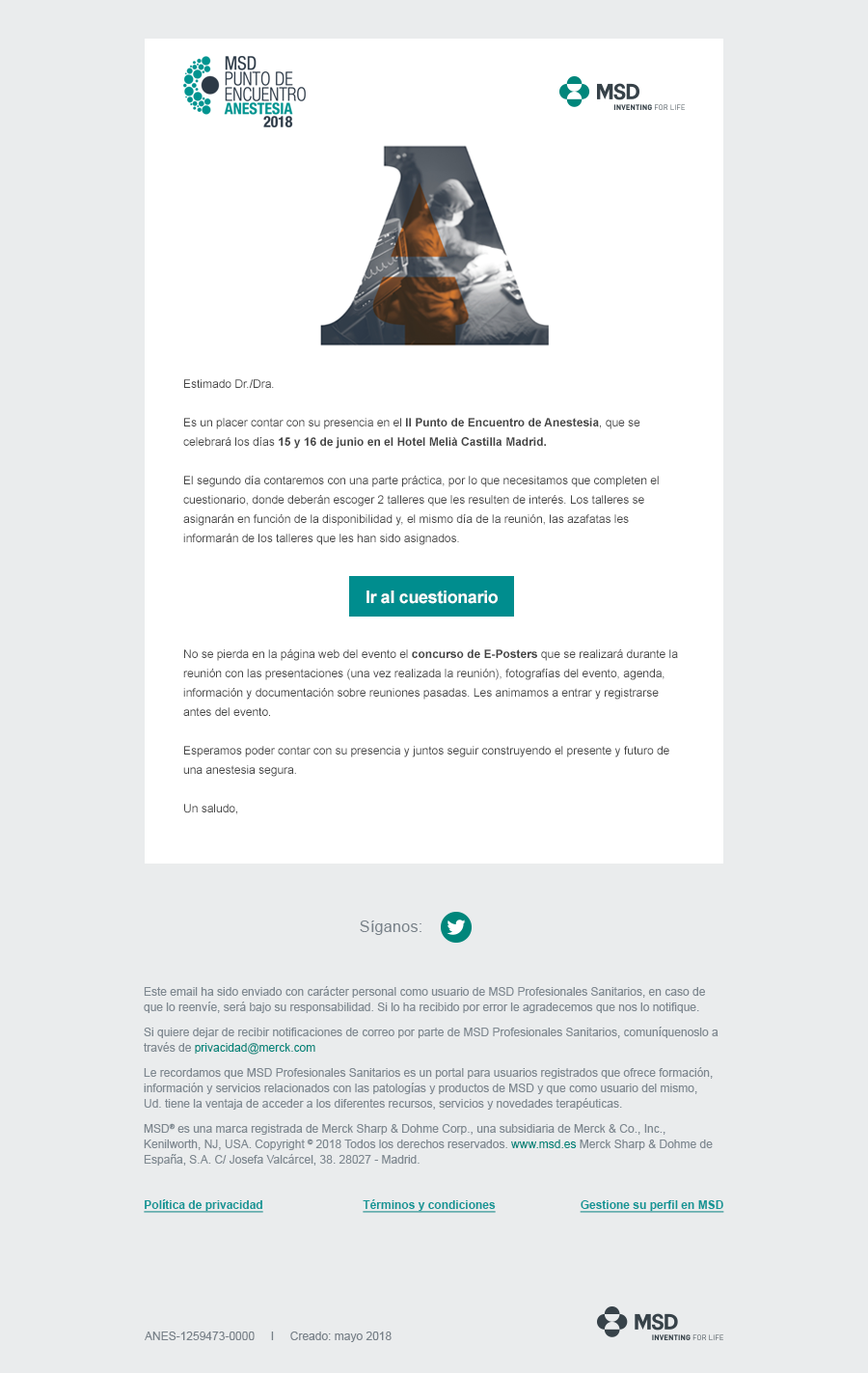
<style>
.page{position:relative;width:868px;height:1373px;background:#eaeced}
.page>*{position:absolute;margin:0}
.t1{font:11.6px/19.3px "ArialMT";color:#444444}
.t2{font:11.6px/19.3px "Arial-BoldMT";color:#444444}
.t3{font:17.4px "Arial-BoldMT";letter-spacing:-0.02em;color:#ffffff}
.t4{font:15.4px "ArialMT";letter-spacing:0.02em;color:#788189}
.t5{font:11.6px/15.4px "ArialMT";color:#7e8890}
.t6{font:11.6px/15.4px "ArialMT";color:#00867b}
.t7{font:11.6px "Arial-BoldMT";color:#139696;text-decoration:underline}
.t8{font:11.6px "ArialMT";color:#778088}
</style>
<div class="page">
<p class="t1" style="left:183px;top:379px;width:495px;height:435px">Estimado Dr./Dra.<br><br>Es un placer contar con su presencia en el <span class="t2">II Punto de Encuentro de Anestesia</span>, que se celebrará los días <span class="t2">15 y 16 de junio en el Hotel Melià Castilla Madrid.<br></span><br>El segundo día contaremos con una parte práctica, por lo que necesitamos que completen el cuestionario, donde deberán escoger 2 talleres que les resulten de interés. Los talleres se asignarán en función de la disponibilidad y, el mismo día de la reunión, las azafatas les informarán de los talleres que les han sido asignados. <br><br><br><br><br><br>No se pierda en la página web del evento el <span class="t2">concurso de E-Posters </span>que se realizará durante la reunión con las presentaciones (una vez realizada la reunión), fotografías del evento, agenda, información y documentación sobre reuniones pasadas. Les animamos a entrar y registrarse antes del evento.<br><br>Esperamos poder contar con su presencia y juntos seguir construyendo el presente y futuro de una anestesia segura.<br><br>Un saludo,</p>
<p class="t3" style="left:367px;top:591px;width:131px;height:13px">Ir al cuestionario</p>
<p class="t4" style="left:360px;top:921px;width:62px;height:14px">Síganos:</p>
<p class="t5" style="left:144px;top:986px;width:575px;height:180px">Este email ha sido enviado con carácter personal como usuario de MSD Profesionales Sanitarios, en caso de que lo reenvíe, será bajo su responsabilidad. Si lo ha recibido por error le agradecemos que nos lo notifique. <br>Si quiere dejar de recibir notificaciones de correo por parte de MSD Profesionales Sanitarios, comuníquenoslo a través de <span class="t6">privacidad@merck.com</span> <br>Le recordamos que MSD Profesionales Sanitarios es un portal para usuarios registrados que ofrece formación, información y servicios relacionados con las patologías y productos de MSD y que como usuario del mismo,<br>Ud. tiene la ventaja de acceder a los diferentes recursos, servicios y novedades terapéuticas. <br>MSD® es una marca registrada de Merck Sharp &amp; Dohme Corp., una subsidiaria de Merck &amp; Co., Inc., Kenilworth, NJ, USA. Copyright © 2018 Todos los derechos reservados. <span class="t6">www.msd.es</span> Merck Sharp &amp; Dohme de España, S.A. C/ Josefa Valcárcel, 38. 28027 - Madrid.</p>
<p class="t7" style="left:144px;top:1199px;width:119px;height:14px">Política de privacidad</p>
<p class="t7" style="left:363px;top:1199px;width:133px;height:14px">Términos y condiciones</p>
<p class="t7" style="left:580px;top:1200px;width:145px;height:13px">Gestione su perfil en MSD</p>
<p class="t8" style="left:145px;top:1332px;width:247px;height:10px">ANES-1259473-0000     I     Creado: mayo 2018</p>
</div>
